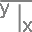
<style>
.page{position:relative;width:32px;height:32px;background:#ffffff}
.page>*{position:absolute;margin:0}
.t1{font:19px "DejaVuSans";color:#808080}
</style>
<div class="page">
<p class="t1" style="left:0px;top:3px;width:10px;height:15px">y</p>
<p class="t1" style="left:22px;top:21px;width:11px;height:11px">x</p>
</div>
